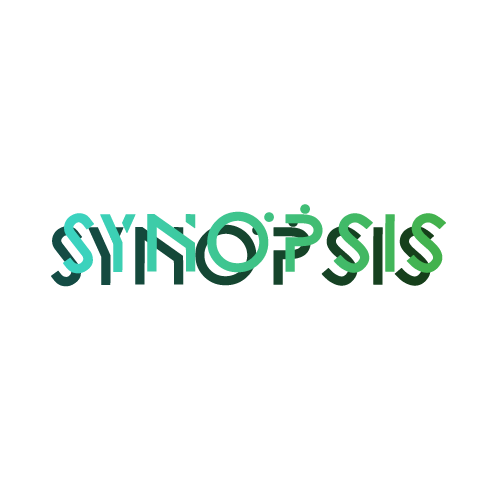
<style>
.page{position:relative;width:500px;height:500px;background:#ffffff}
.page>*{position:absolute;margin:0}
.t1{font:70.8px "FoundationLogo";letter-spacing:-0.25em;font-weight:bold}
</style>
<div class="page">
<p class="t1" style="left:63px;top:204px;width:383px;height:70px">Synopsis</p>
<p class="t1" style="left:51px;top:217px;width:383px;height:70px">Synopsis</p>
</div>
